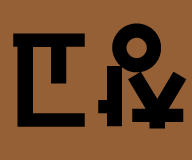
<style>
.page{position:relative;width:192px;height:160px;background:#956036}
.page>*{position:absolute;margin:0}
.t1{font:112.3px "HaanYHeadM";color:#000000}
</style>
<div class="page">
<p class="t1" style="left:13px;top:23px;width:174px;height:106px;rotate:180deg">창고</p>
</div>
